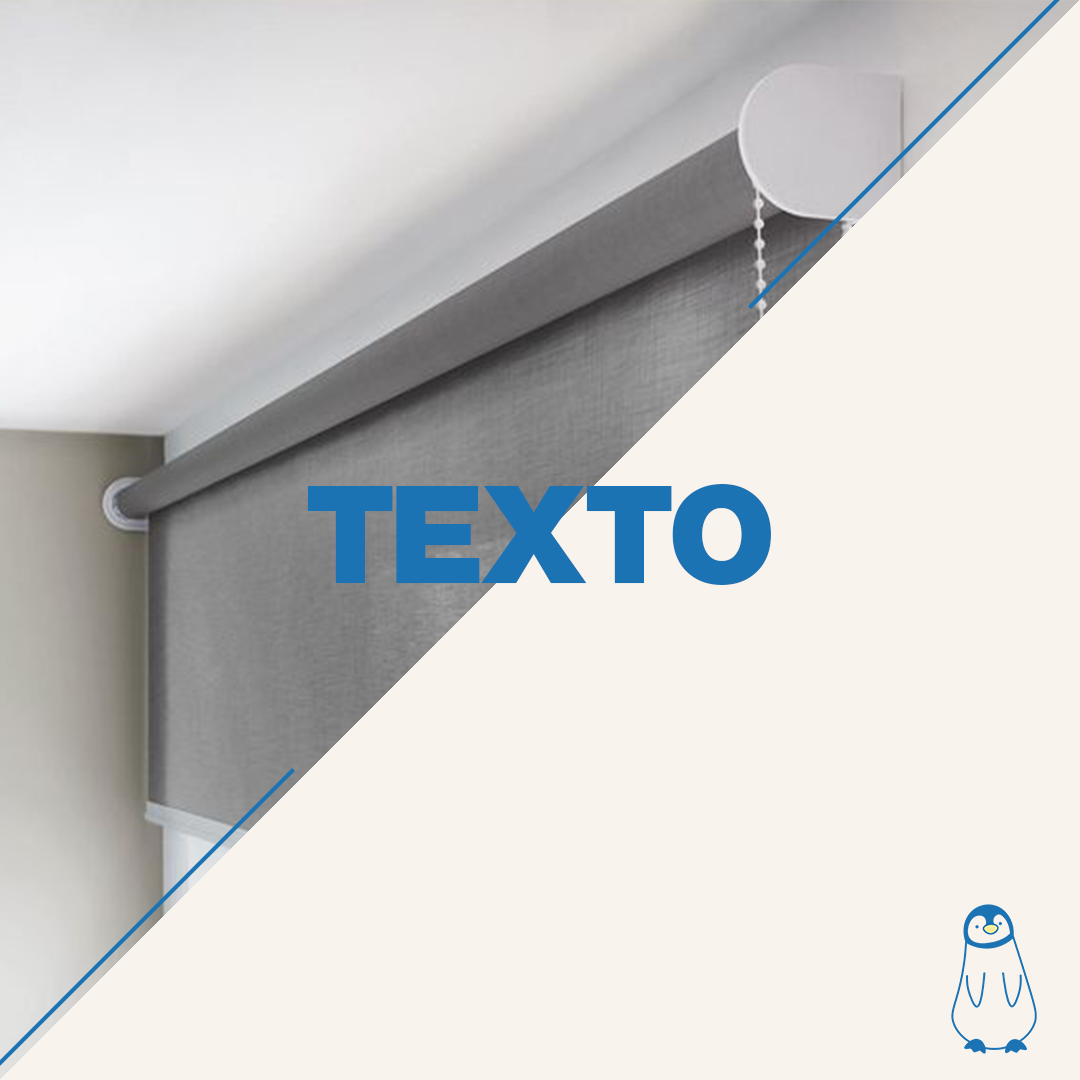
<style>
.page{position:relative;width:1080px;height:1080px;background:#f8f3ed}
.page>*{position:absolute;margin:0}
.t1{font:144.9px "NimbusSansBeckerPBla";color:#1b73b3}
</style>
<div class="page">
<p class="t1" style="left:307px;top:484px;width:464px;height:101px">TEXTO</p>
</div>
